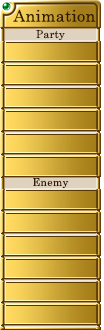
<style>
.page{position:relative;width:104px;height:330px}
.page>*{position:absolute;margin:0}
.t1{font:16px "CenturySchoolbook";letter-spacing:0.025em;color:#321a02}
.t2{font:10.7px "CenturySchoolbook";letter-spacing:0.025em;color:#321a02}
</style>
<div class="page">
<p class="t1" style="left:13px;top:9px;width:83px;height:13px">Animation</p>
<p class="t2" style="left:36px;top:30px;width:29px;height:11px">Party</p>
<p class="t2" style="left:33px;top:178px;width:36px;height:11px">Enemy</p>
</div>
